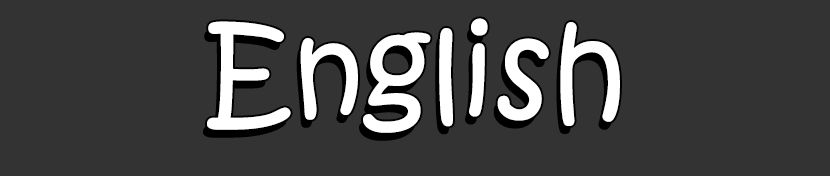
<style>
.page{position:relative;width:830px;height:176px;background:#333333}
.page>*{position:absolute;margin:0}
.t1{font:124.4px "KristenITC-Regular";color:#ffffff}
</style>
<div class="page">
<p class="t1" style="left:207px;top:18px;width:413px;height:115px">English</p>
</div>
